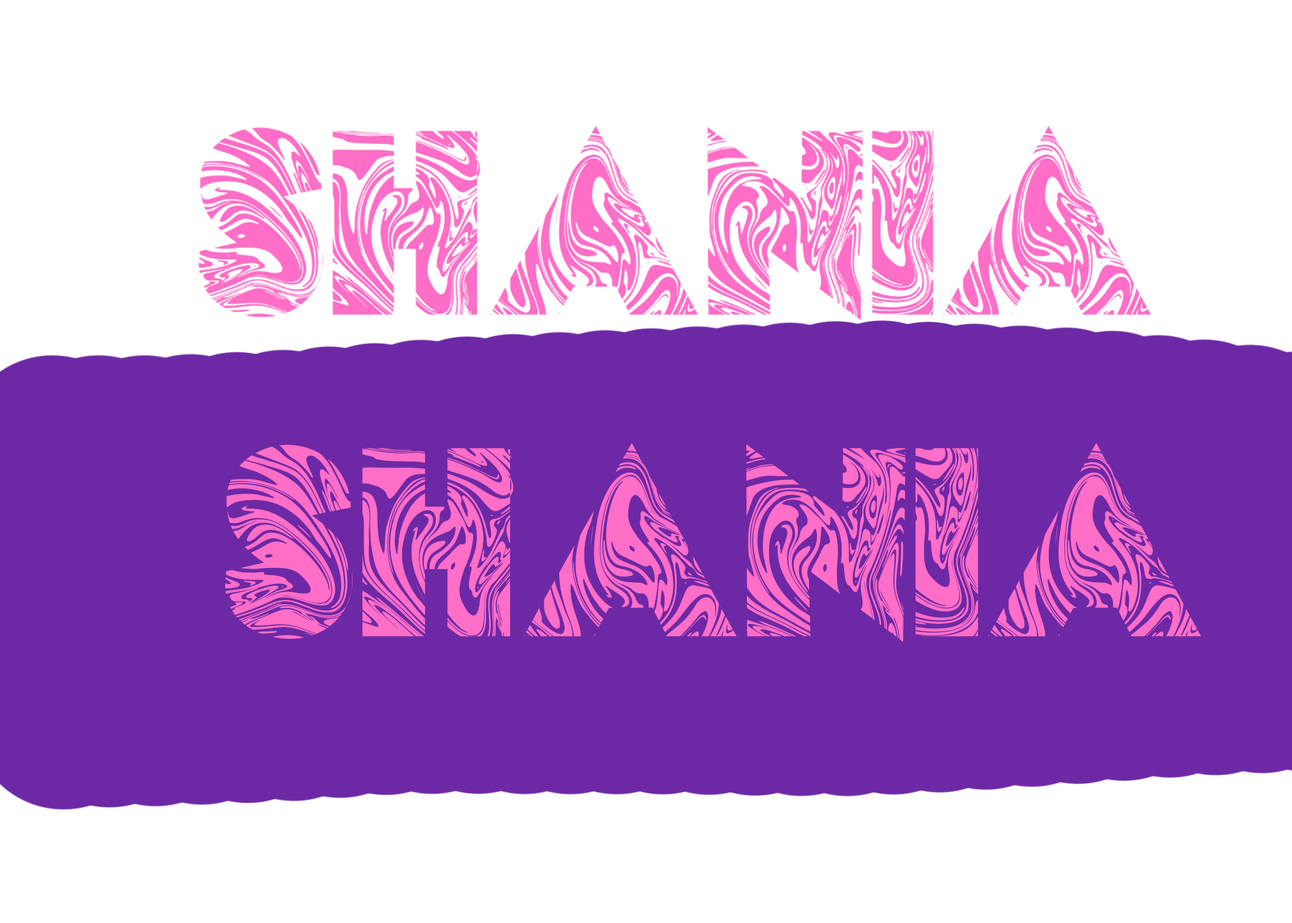
<style>
.page{position:relative;width:1292px;height:923px;background:#6d29a5}
.page>*{position:absolute;margin:0}
.t1{font:256.4px "FLUID-Bold";color:#ff6ec7}
</style>
<div class="page">
<p class="t1" style="left:225px;top:443px;width:977px;height:199px">SHANIA</p>
</div>
